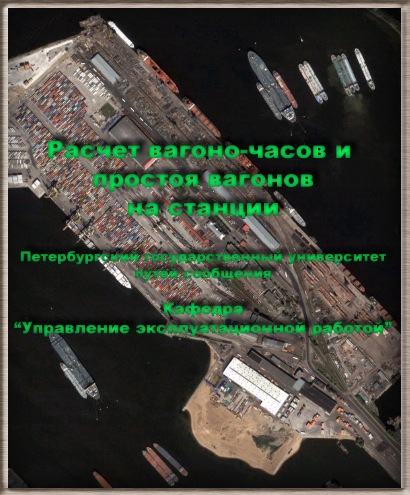
<style>
.page{position:relative;width:410px;height:495px}
.page>*{position:absolute;margin:0}
.t1{font:14px "Arial-Black"}
.t2{font:24px "Arial-Black"}
.t3{font:16px "Arial-Black"}
</style>
<div class="page">
<p class="t1" style="left:14px;top:140px;width:378px;height:197px;text-align:center"><span class="t2">Расчет вагоно-часов и <br>простоя вагонов<br>на станции<br><br></span>Петербургский государственный университет<br>путей сообщения<br><br><span class="t3">Кафедра<br>“Управление эксплуатационной работой”</span></p>
</div>
